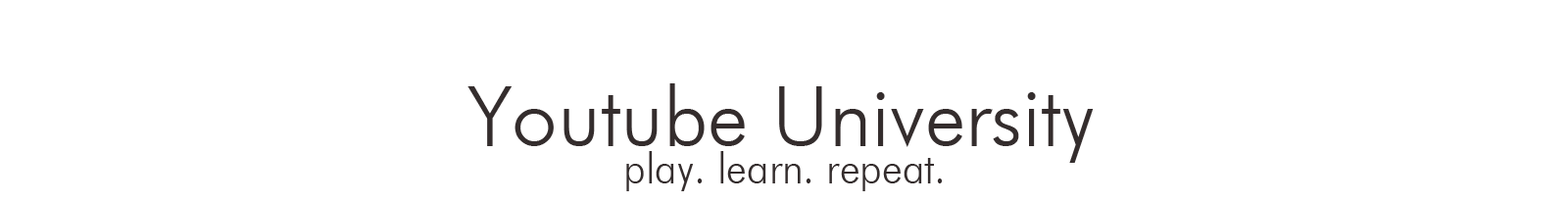
<style>
.page{position:relative;width:1568px;height:204px;background:#ffffff}
.page>*{position:absolute;margin:0}
.t1{font:81.7px "FuturaOblique";color:#342d2d}
.t2{font:40.8px "FuturaOblique";color:#342d2d}
</style>
<div class="page">
<p class="t1" style="left:467px;top:83px;width:627px;height:80px">Youtube University</p>
<p class="t2" style="left:626px;top:151px;width:317px;height:40px">play. learn. repeat.</p>
</div>
